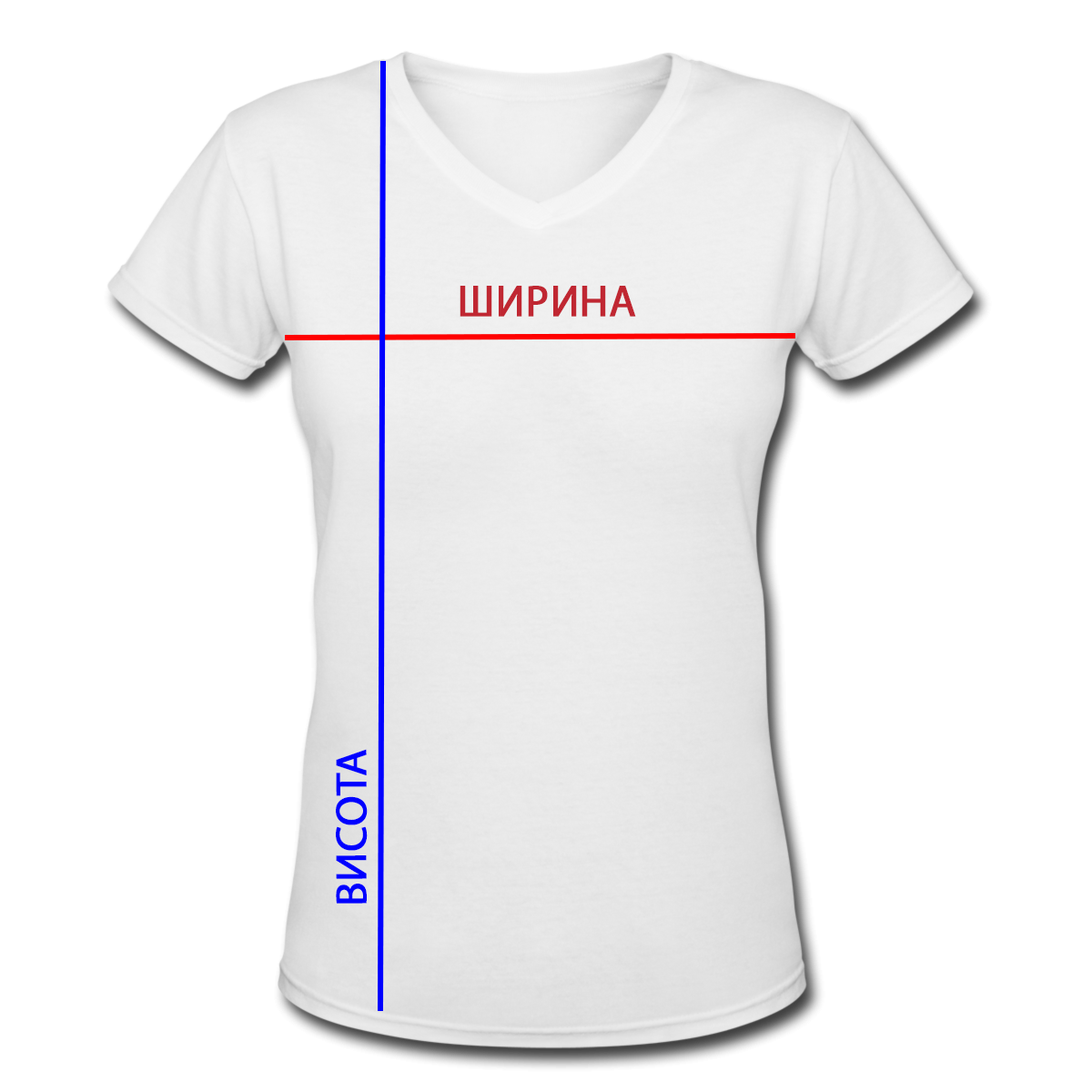
<style>
.page{position:relative;width:1092px;height:1092px;background:#ffffff}
.page>*{position:absolute;margin:0}
.t1{font:43.7px "MyriadPro-Regular";color:#c02732;text-transform:uppercase;font-weight:bold}
.t2{font:43.7px "MyriadPro-Regular";color:#0000ff;text-transform:uppercase;font-weight:bold}
</style>
<div class="page">
<p class="t1" style="left:460px;top:286px;width:176px;height:31px">ширина</p>
<p class="t2" style="left:336px;top:749px;width:32px;height:155px;rotate:-90deg">висота</p>
</div>
